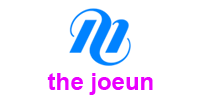
<style>
.page{position:relative;width:200px;height:100px;background:#ffffff}
.page>*{position:absolute;margin:0}
.t1{font:24px "Arial-BoldMT";color:#ea00ff}
</style>
<div class="page">
<p class="t1" style="left:47px;top:73px;width:106px;height:22px">the joeun</p>
</div>
